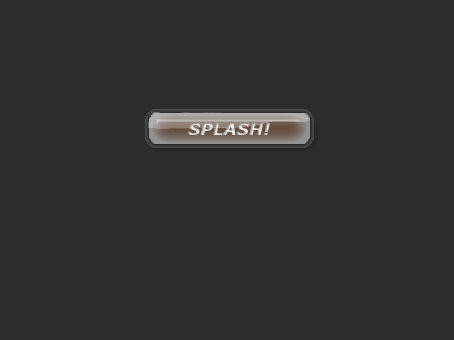
<style>
.page{position:relative;width:454px;height:340px;background:#2d2c2c}
.page>*{position:absolute;margin:0}
.t1{font:17px "Verdana-BoldItalic"}
</style>
<div class="page">
<p class="t1" style="left:188px;top:123px;width:82px;height:12px">SPLASH!</p>
</div>
